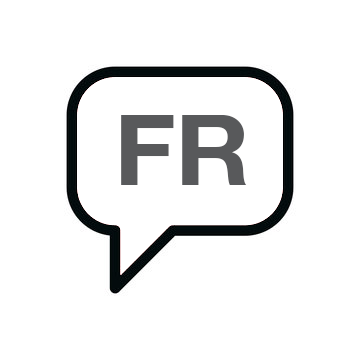
<style>
.page{position:relative;width:360px;height:360px;background:#ffffff}
.page>*{position:absolute;margin:0}
.t1{font:98.1px "HelveticaNeue-Bold";color:#58595b;scale:1.06 1}
</style>
<div class="page">
<p class="t1" style="left:121px;top:115px;width:126px;height:70px">FR</p>
</div>
